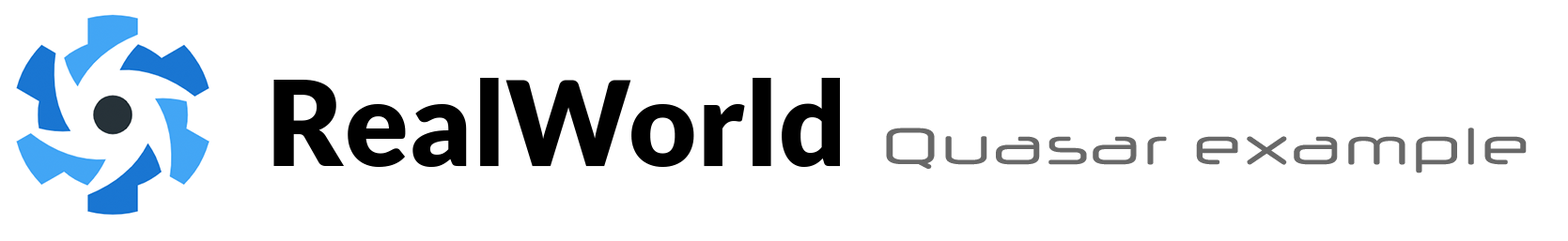
<style>
.page{position:relative;width:1568px;height:241px;background:#ffffff}
.page>*{position:absolute;margin:0}
.t1{font:51.6px "NeuropolXFree";color:#686868;scale:1.11 1}
</style>
<div class="page">
<p class="t1" style="left:886px;top:128px;width:641px;height:46px">Quasar example</p>
</div>
